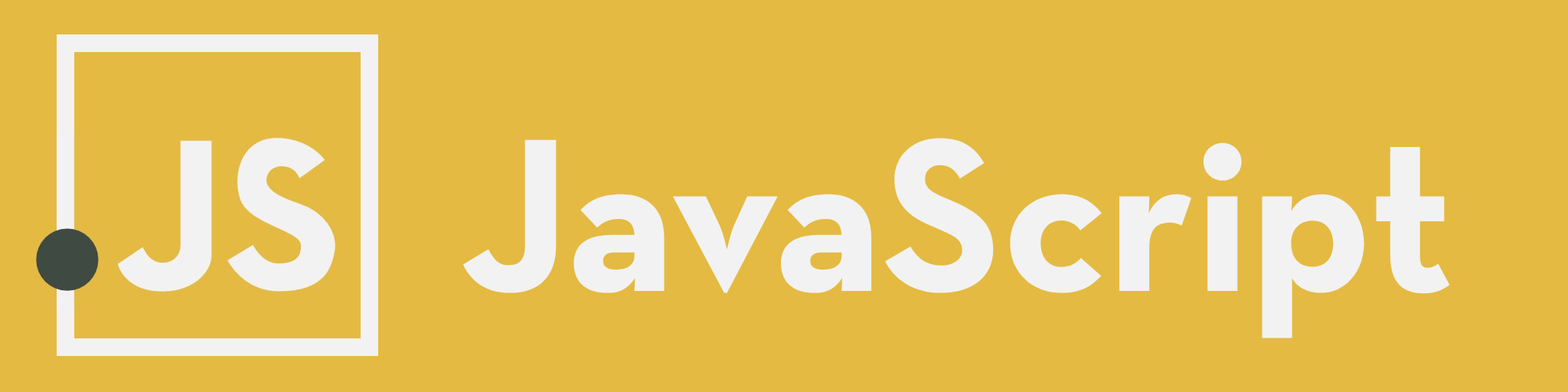
<style>
.page{position:relative;width:1568px;height:392px;background:#e4ba42}
.page>*{position:absolute;margin:0}
.t1{font:222px "NeutrafaceText-Bold";color:#f2f2f2}
</style>
<div class="page">
<p class="t1" style="left:462px;top:138px;width:988px;height:200px">JavaScript</p>
</div>
